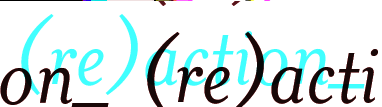
<style>
.page{position:relative;width:382px;height:107px;background:#ffffff}
.page>*{position:absolute;margin:0}
.t1{font:100px "MrsEavesItalic";color:#40ffff}
</style>
<div class="page">
<p class="t1" style="left:21px;top:14px;width:344px;height:81px">(re)action_</p>
</div>
